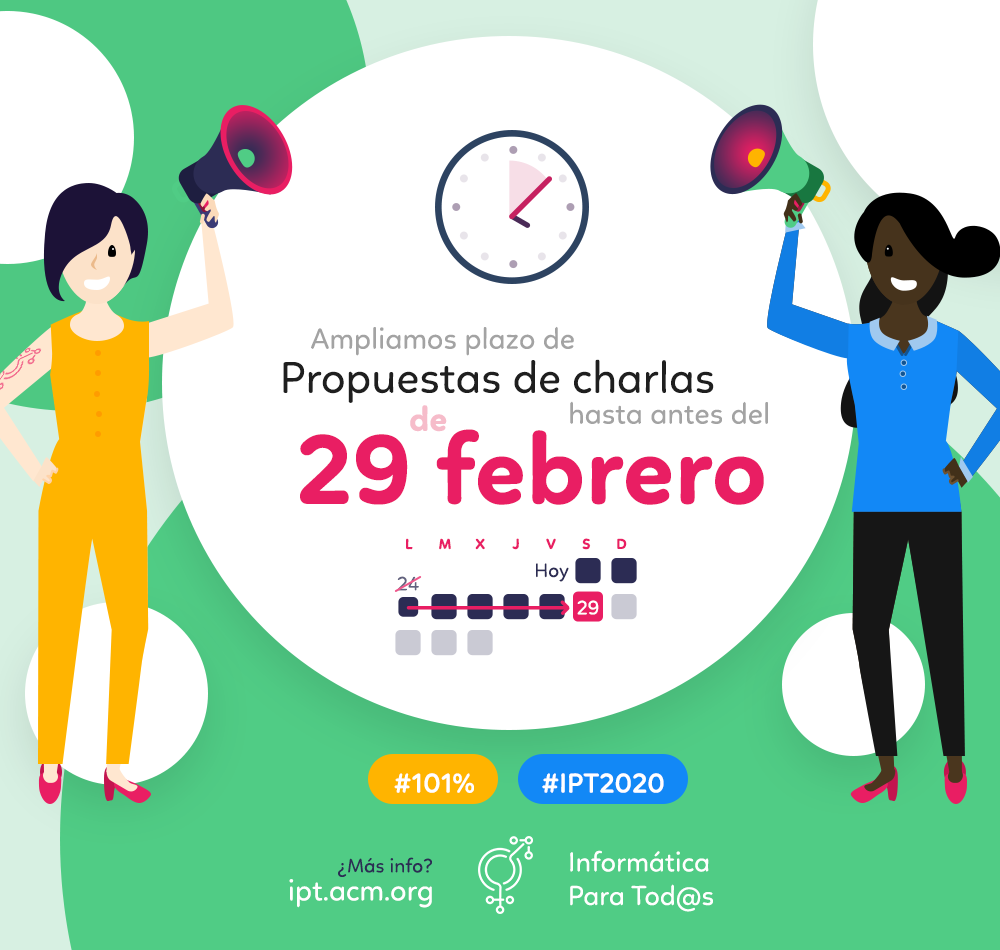
<style>
.page{position:relative;width:1000px;height:950px;background:#ffffff}
.page>*{position:absolute;margin:0}
.t1{font:30px "Linotte-Regular";color:#a3a3a3}
.t2{font:45px "Linotte-Regular";color:#1f1f1f}
.t3{font:35px "Linotte-Bold";color:#f6bcca}
.t4{font:101px "Linotte-Bold";color:#e91e63}
.t5{font:15px "Linotte-Bold";color:#e91e63}
.t6{font:20px "Linotte-Regular";color:#2c2c54}
.t7{font:20px "Linotte-Regular";color:#61617f}
.t8{font:20px "Linotte-Regular";color:#ffffff}
.t9{font:28px "Linotte-SemiBold";color:#ffffff}
.t10{font:28px "Linotte-Regular";color:#ffffff}
.t11{font:30px "Linotte-Regular";color:#ffffff}
</style>
<div class="page">
<p class="t1" style="left:311px;top:326px;width:263px;height:30px">Ampliamos plazo de</p>
<p class="t2" style="left:283px;top:359px;width:431px;height:44px">Propuestas de charlas</p>
<p class="t1" style="left:570px;top:401px;width:198px;height:23px">hasta antes del</p>
<p class="t3" style="left:410px;top:405px;width:37px;height:27px">de</p>
<p class="t4" style="left:300px;top:429px;width:464px;height:76px">29 febrero</p>
<p class="t5" style="left:406px;top:538px;width:7px;height:12px">L</p>
<p class="t5" style="left:439px;top:538px;width:12px;height:12px">M</p>
<p class="t5" style="left:475px;top:538px;width:10px;height:12px">X</p>
<p class="t5" style="left:512px;top:538px;width:7px;height:12px">J</p>
<p class="t5" style="left:546px;top:538px;width:10px;height:12px">V</p>
<p class="t5" style="left:582px;top:538px;width:9px;height:12px">S</p>
<p class="t5" style="left:617px;top:538px;width:10px;height:11px">D</p>
<p class="t6" style="left:536px;top:563px;width:33px;height:19px">Hoy</p>
<p class="t7" style="left:397px;top:576px;width:22px;height:15px">24</p>
<p class="t8" style="left:577px;top:600px;width:22px;height:15px">29</p>
<p class="t9" style="left:394px;top:773px;width:80px;height:20px">#101%</p>
<p class="t9" style="left:542px;top:773px;width:122px;height:20px">#IPT2020</p>
<p class="t6" style="left:338px;top:857px;width:94px;height:20px">¿Más info?</p>
<p class="t10" style="left:570px;top:850px;width:143px;height:62px;text-align:right">Informática<br>Para Tod@s</p>
<p class="t11" style="left:289px;top:879px;width:143px;height:29px">ipt.acm.org</p>
</div>
